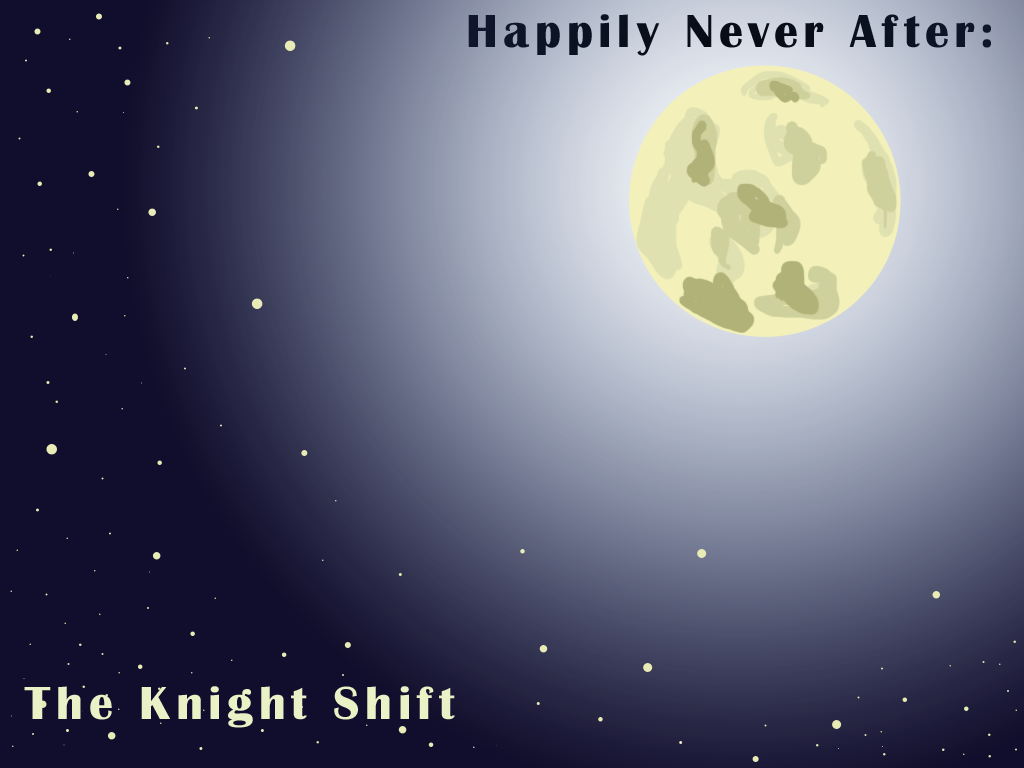
<style>
.page{position:relative;width:1024px;height:768px}
.page>*{position:absolute;margin:0}
.t1{font:48px "BritannicBold";letter-spacing:0.125em;color:#0b1221}
.t2{font:48px "BritannicBold";letter-spacing:0.125em;color:#ebf1c6}
</style>
<div class="page">
<p class="t1" style="left:468px;top:14px;width:523px;height:42px">Happily Never After:</p>
<p class="t2" style="left:24px;top:686px;width:431px;height:42px">The Knight Shift</p>
</div>
